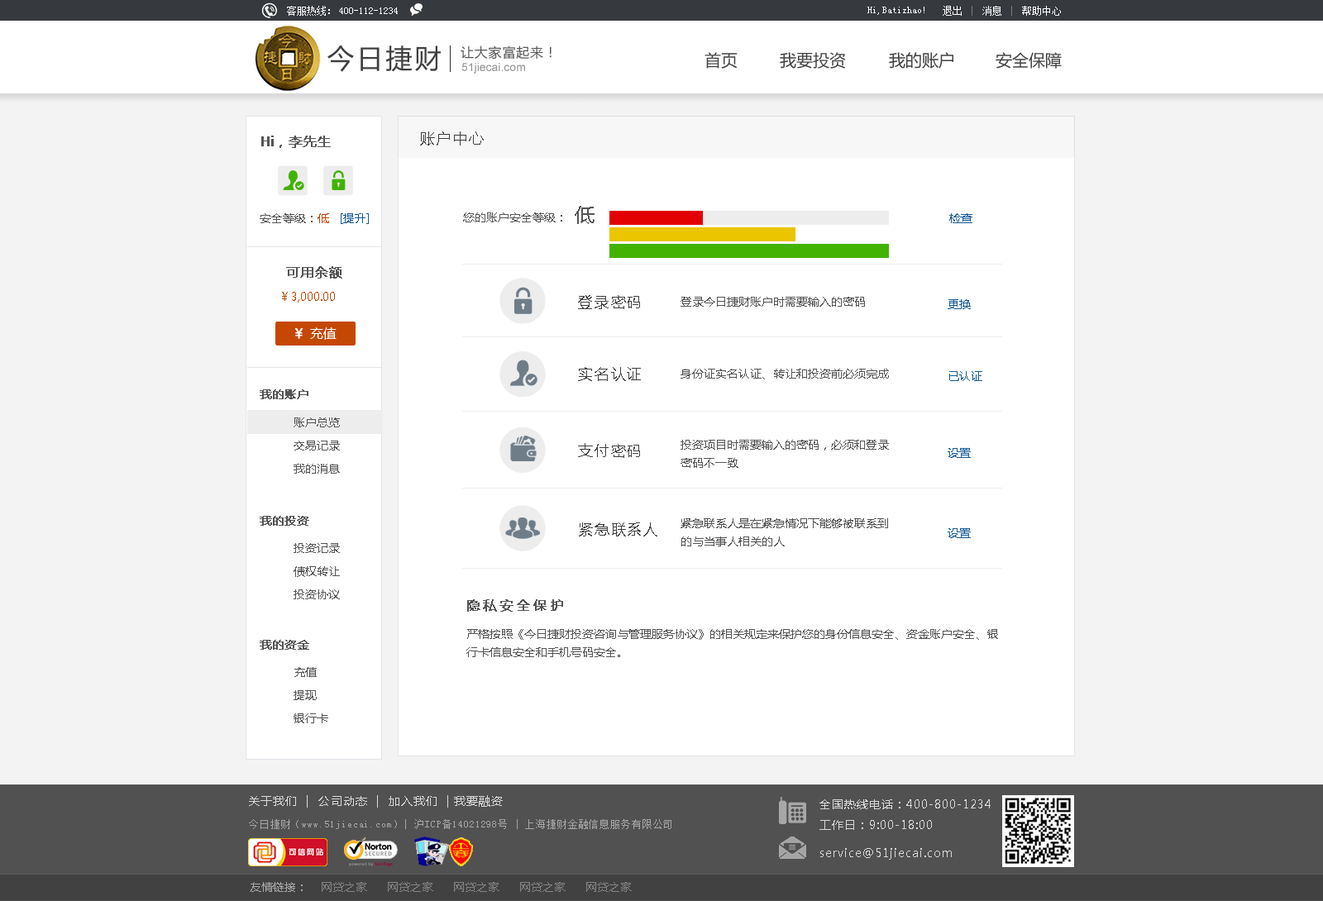
<style>
.page{position:relative;width:1323px;height:901px;background:#ffffff}
.page>*{position:absolute;margin:0}
.t1{font:9.9px "SimSun";color:#ffffff}
.t2{font:26.5px "MicrosoftYaHei";letter-spacing:0.1em;color:#3f3f3f}
.t3{font:13.2px "MicrosoftYaHei";letter-spacing:0.05em;color:#575757}
.t4{font:16.5px "MicrosoftYaHei";color:#414141}
.t5{font:11.6px "ArialMT";color:#969697}
.t6{font:13.2px "MicrosoftYaHei";color:#545454;font-weight:bold}
.t7{font:14.9px "MicrosoftYaHei";letter-spacing:0.1em;color:#3f3f3f}
.t8{font:19.8px "MicrosoftYaHei";letter-spacing:0.1em;color:#545454}
.t9{font:11.6px "MicrosoftYaHei";color:#545454}
.t10{font:11.6px "MicrosoftYaHei";color:#c44704}
.t11{font:11.6px "MicrosoftYaHei";color:#175a94}
.t12{font:11.6px "MicrosoftYaHei";color:#c44703}
.t13{font:13.2px "MicrosoftYaHei";color:#ffffff}
.t14{font:13.2px "MicrosoftYaHei";color:#ffffff;font-weight:bold}
.t15{font:11.6px "MicrosoftYaHei";color:#545454;font-weight:bold}
.t16{font:11.6px/23.2px "MicrosoftYaHei";color:#545454}
.t17{font:11.6px/18.2px "MicrosoftYaHei";color:#545454}
.t18{font:13.2px "MicrosoftYaHei";letter-spacing:0.2em;color:#545454;font-weight:bold}
.t19{font:11.6px "MicrosoftYaHei";letter-spacing:0.07em;color:#dbdbdb}
.t20{font:11.6px "MicrosoftYaHei";letter-spacing:0.07em;color:#dadada}
.t21{font:9.9px "SimSun";letter-spacing:0.07em;color:#a7a7a7}
.t22{font:11.6px "MicrosoftYaHei";color:#858484}
.t23{font:11.6px "MicrosoftYaHei";color:#a7a7a7}
</style>
<div class="page">
<p class="t1" style="left:287px;top:6px;width:43px;height:10px">客服热线：</p>
<p class="t1" style="left:943px;top:6px;width:118px;height:10px">退出    消息    帮助中心</p>
<p class="t1" style="left:339px;top:7px;width:59px;height:7px">400-112-1234</p>
<p class="t1" style="left:867px;top:7px;width:57px;height:8px">Hi,Batizhao!</p>
<p class="t2" style="left:327px;top:45px;width:114px;height:27px">今日捷财</p>
<p class="t3" style="left:461px;top:45px;width:91px;height:14px">让大家富起来！</p>
<p class="t4" style="left:705px;top:52px;width:33px;height:17px">首页</p>
<p class="t4" style="left:780px;top:52px;width:66px;height:17px">我要投资</p>
<p class="t4" style="left:889px;top:52px;width:64px;height:17px">我的账户</p>
<p class="t4" style="left:996px;top:52px;width:66px;height:17px">安全保障</p>
<p class="t5" style="left:461px;top:63px;width:64px;height:11px">51jiecai.com</p>
<p class="t6" style="left:261px;top:136px;width:70px;height:12px">Hi，李先生</p>
<p class="t7" style="left:420px;top:131px;width:64px;height:15px">账户中心</p>
<p class="t8" style="left:575px;top:206px;width:20px;height:18px">低</p>
<p class="t9" style="left:260px;top:213px;width:109px;height:11px">安全等级：<span class="t10">低   </span><span class="t11">[提升]</span></p>
<p class="t9" style="left:463px;top:213px;width:99px;height:9px">您的账户安全等级：</p>
<p class="t11" style="left:949px;top:213px;width:23px;height:10px">检查</p>
<p class="t6" style="left:286px;top:266px;width:56px;height:13px">可用余额</p>
<p class="t12" style="left:282px;top:292px;width:53px;height:11px">￥3,000.00</p>
<p class="t7" style="left:578px;top:295px;width:62px;height:14px">登录密码</p>
<p class="t9" style="left:681px;top:297px;width:184px;height:10px">登录今日捷财账户时需要输入的密码</p>
<p class="t11" style="left:948px;top:299px;width:23px;height:10px">更换</p>
<p class="t13" style="left:294px;top:327px;width:43px;height:13px"><span class="t14">￥ </span>充值</p>
<p class="t7" style="left:578px;top:367px;width:63px;height:14px">实名认证</p>
<p class="t9" style="left:681px;top:369px;width:208px;height:11px">身份证实名认证、转让和投资前必须完成</p>
<p class="t11" style="left:949px;top:371px;width:33px;height:10px">已认证</p>
<p class="t15" style="left:260px;top:389px;width:48px;height:10px">我的账户</p>
<p class="t16" style="left:294px;top:418px;width:46px;height:56px">账户总览<br>交易记录<br>我的消息</p>
<p class="t7" style="left:578px;top:443px;width:62px;height:15px">支付密码</p>
<p class="t17" style="left:681px;top:440px;width:208px;height:28px">投资项目时需要输入的密码，必须和登录<br>密码不一致</p>
<p class="t11" style="left:948px;top:448px;width:23px;height:10px">设置</p>
<p class="t15" style="left:260px;top:516px;width:49px;height:10px">我的投资</p>
<p class="t17" style="left:681px;top:518px;width:207px;height:29px">紧急联系人是在紧急情况下能够被联系到<br>的与当事人相关的人</p>
<p class="t7" style="left:579px;top:523px;width:78px;height:14px">紧急联系人</p>
<p class="t11" style="left:948px;top:528px;width:23px;height:10px">设置</p>
<p class="t16" style="left:294px;top:543px;width:46px;height:56px">投资记录<br>债权转让<br>投资协议</p>
<p class="t18" style="left:467px;top:599px;width:96px;height:13px">隐私安全保护</p>
<p class="t17" style="left:466px;top:629px;width:532px;height:28px">严格按照《今日捷财投资咨询与管理服务协议》的相关规定来保护您的身份信息安全、资金账户安全、银行卡信息安全和手机号码安全。</p>
<p class="t15" style="left:260px;top:640px;width:49px;height:10px">我的资金</p>
<p class="t16" style="left:294px;top:667px;width:34px;height:57px">充值<br>提现<br>银行卡</p>
<p class="t19" style="left:249px;top:795px;width:254px;height:13px">关于我们  |  公司动态  |  加入我们  | 我要融资</p>
<p class="t20" style="left:819px;top:800px;width:172px;height:30px">全国热线电话：400-800-1234<br>工作日：9:00-18:00</p>
<p class="t21" style="left:249px;top:819px;width:422px;height:10px">今日捷财（www.51jiecai.com）| 沪ICP备14021298号 | 上海捷财金融信息服务有限公司</p>
<p class="t20" style="left:820px;top:848px;width:132px;height:12px">service@51jiecai.com</p>
<p class="t22" style="left:250px;top:882px;width:382px;height:10px"><span class="t23">友情链接：</span>    网贷之家      网贷之家      网贷之家      网贷之家      网贷之家</p>
</div>
